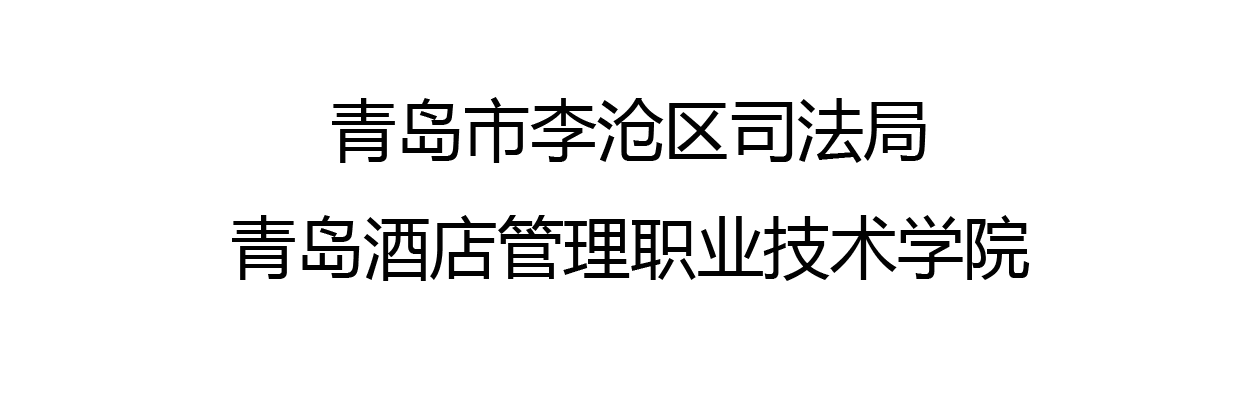
<style>
.page{position:relative;width:1242px;height:414px;background:#ffffff}
.page>*{position:absolute;margin:0}
.t1{font:66.7px "MicrosoftYaHei";color:#010101}
</style>
<div class="page">
<p class="t1" style="left:232px;top:97px;width:798px;height:184px;text-align:center">青岛市李沧区司法局<br>青岛酒店管理职业技术学院</p>
</div>
